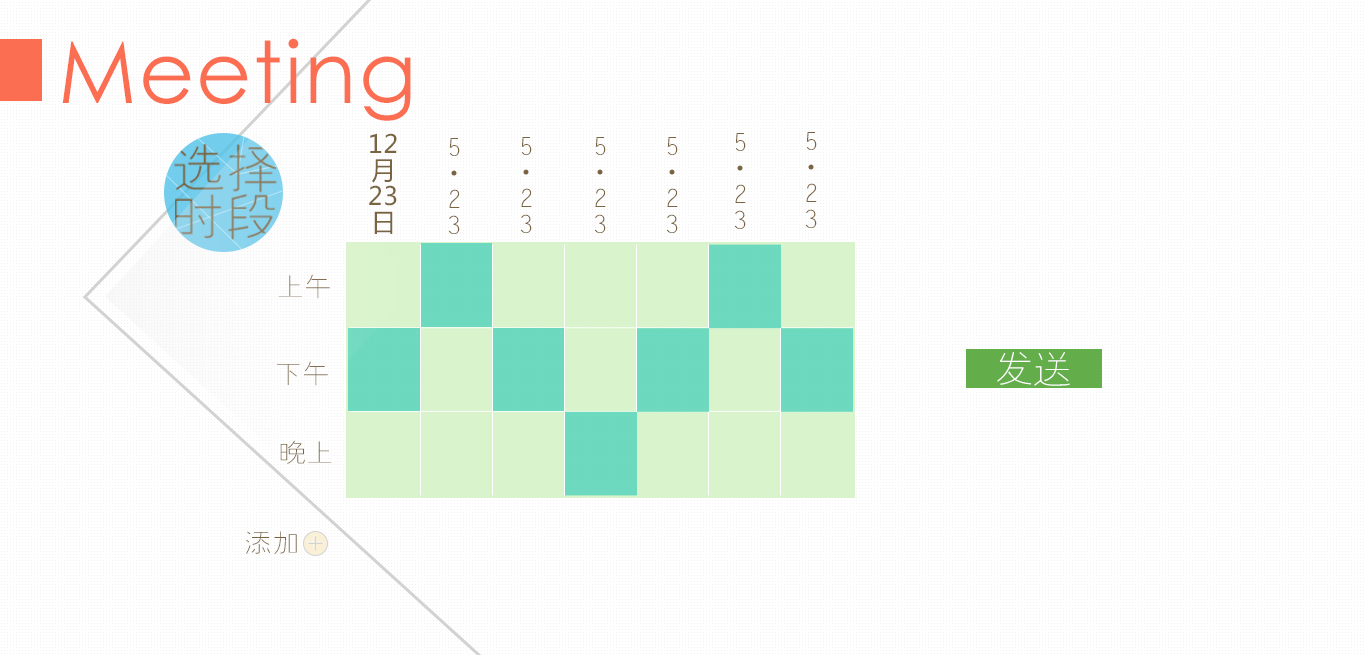
<style>
.page{position:relative;width:1365px;height:655px;background:#ffffff}
.page>*{position:absolute;margin:0}
.t1{font:85.8px "CenturyGothic";letter-spacing:0.025em;color:#fb6e52}
.t2{font:25px/26px "MicrosoftYaHei";letter-spacing:0.025em;color:#796341}
.t3{font:25px/26px "FZYXJW--GB1-0";letter-spacing:0.025em;color:#796341}
.t4{font:26.6px "FZYXJW--GB1-0";letter-spacing:0.025em;color:#796341}
.t5{font:38.9px "FZYXJW--GB1-0";letter-spacing:0.025em;color:#ffffff}
</style>
<div class="page">
<p class="t1" style="left:62px;top:38px;width:349px;height:83px">Meeting</p>
<p class="t2" style="left:369px;top:133px;width:28px;height:101px;text-align:center">12<br>月<br>23<br>日</p>
<p class="t3" style="left:520px;top:137px;width:12px;height:96px;text-align:center">5<br>·<br>2<br>3</p>
<p class="t3" style="left:594px;top:137px;width:12px;height:96px;text-align:center">5<br>·<br>2<br>3</p>
<p class="t3" style="left:666px;top:137px;width:12px;height:96px;text-align:center">5<br>·<br>2<br>3</p>
<p class="t3" style="left:734px;top:133px;width:12px;height:96px;text-align:center">5<br>·<br>2<br>3</p>
<p class="t3" style="left:805px;top:132px;width:12px;height:96px;text-align:center">5<br>·<br>2<br>3</p>
<p class="t3" style="left:448px;top:138px;width:12px;height:96px;text-align:center">5<br>·<br>2<br>3</p>
<p class="t4" style="left:278px;top:274px;width:52px;height:25px">上午</p>
<p class="t5" style="left:997px;top:352px;width:73px;height:34px">发送</p>
<p class="t4" style="left:277px;top:361px;width:51px;height:25px">下午</p>
<p class="t4" style="left:280px;top:440px;width:52px;height:24px">晚上</p>
<p class="t4" style="left:246px;top:531px;width:51px;height:23px">添加</p>
</div>
